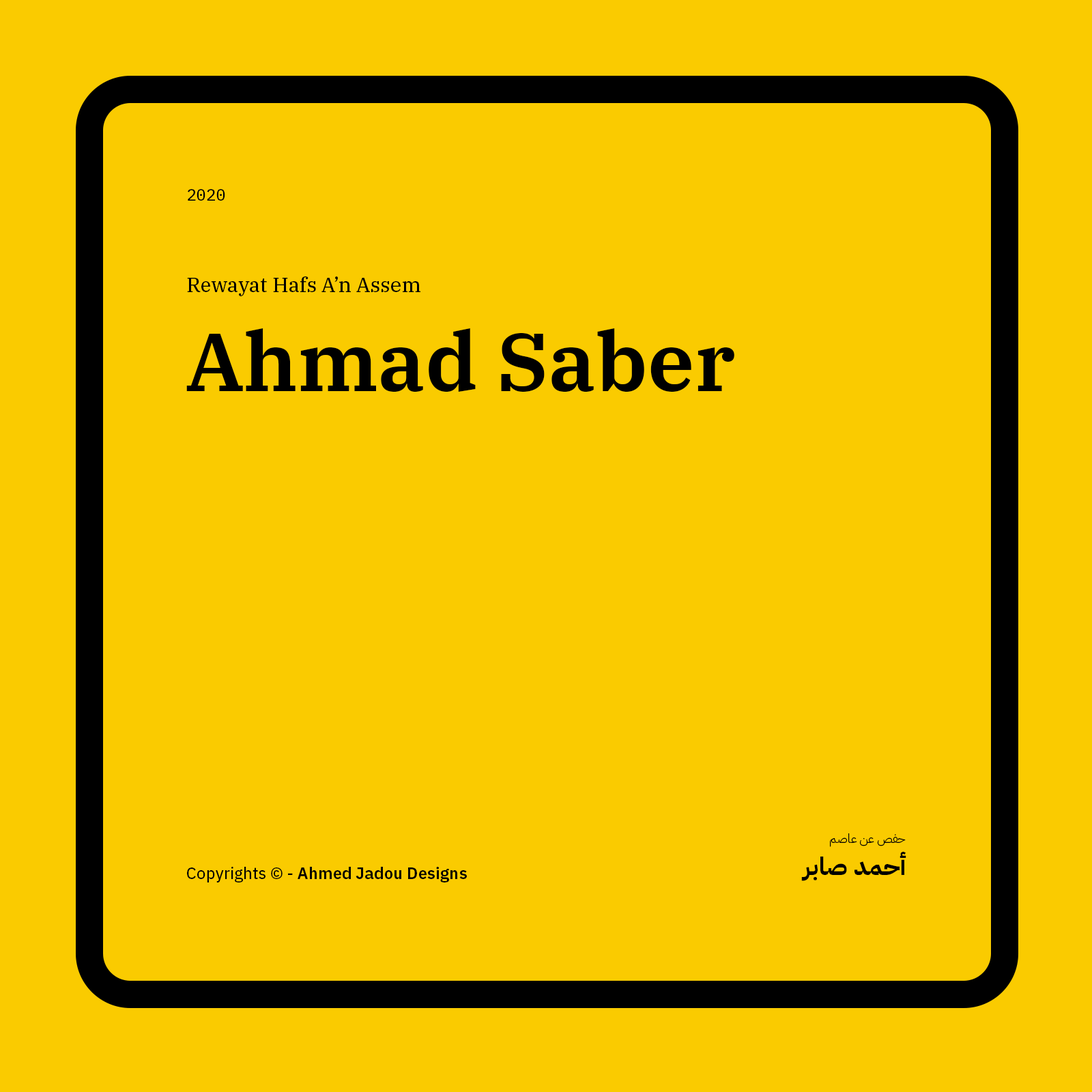
<style>
.page{position:relative;width:1092px;height:1092px;background:#facb00}
.page>*{position:absolute;margin:0}
.t1{font:16.4px "IBMPlexMono-Text";color:#000000}
.t2{font:20.5px "IBMPlexSerif-Text";color:#000000}
.t3{font:81.9px "IBMPlexSerif-SemiBold";color:#000000}
.t4{font:12.3px "IBMPlexArabic-Light";color:#000000}
.t5{font:24.6px "IBMPlexArabic-Bold";color:#000000}
.t6{font:16.4px "IBMPlexSans-SemiBold";color:#000000}
.t7{font:16.4px "IBMPlexSans-Text";color:#000000}
</style>
<div class="page">
<p class="t1" style="left:188px;top:189px;width:37px;height:12px">2020</p>
<p class="t2" style="left:187px;top:276px;width:233px;height:20px">Rewayat Hafs A’n Assem</p>
<p class="t3" style="left:186px;top:328px;width:548px;height:64px">Ahmad Saber</p>
<p class="t4" style="left:830px;top:833px;width:76px;height:14px">حفص عن عاصم</p>
<p class="t5" style="left:801px;top:852px;width:105px;height:29px">أحمد صابر</p>
<p class="t6" style="left:187px;top:867px;width:280px;height:15px"><span class="t7">Copyrights © - </span>Ahmed Jadou Designs</p>
</div>
